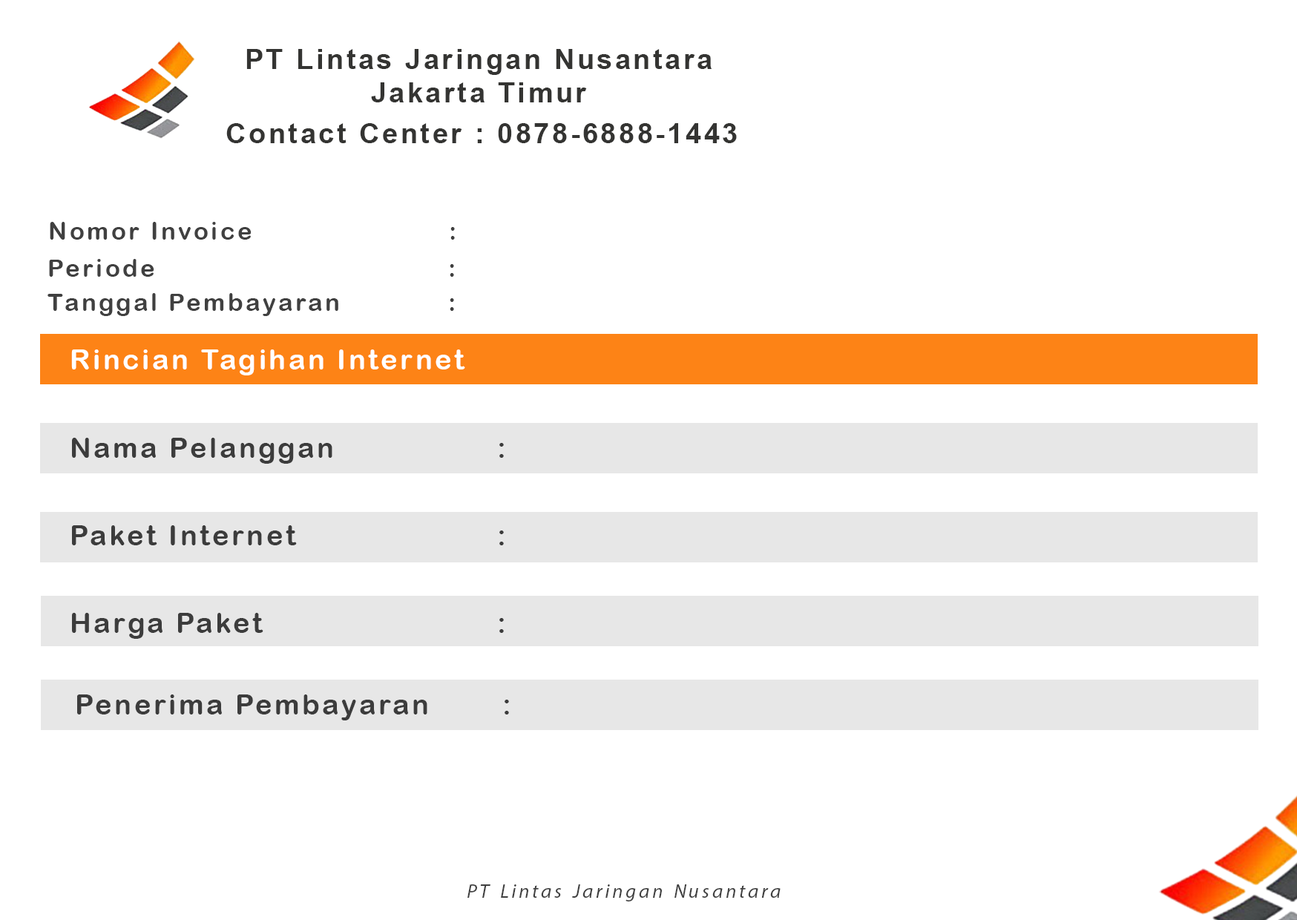
<style>
.page{position:relative;width:1297px;height:920px;background:#ffffff}
.page>*{position:absolute;margin:0}
.t1{font:27.8px "Arial-BoldMT";letter-spacing:0.1em;color:#343432}
.t2{font:24.7px "ArialRoundedMTBold";letter-spacing:0.1em;color:#404040}
.t3{font:27.8px "ArialRoundedMTBold";letter-spacing:0.1em;color:#ffffff}
.t4{font:27.8px "ArialRoundedMTBold";letter-spacing:0.1em;color:#3c3c3c}
.t5{font:27.8px "MyriadArabic-It";letter-spacing:0.1em;color:#404040}
</style>
<div class="page">
<p class="t1" style="left:246px;top:49px;width:465px;height:53px;text-align:center">PT Lintas Jaringan Nusantara<br>Jakarta Timur</p>
<p class="t1" style="left:226px;top:123px;width:511px;height:20px">Contact Center : 0878-6888-1443</p>
<p class="t2" style="left:50px;top:222px;width:405px;height:18px">Nomor Invoice        :</p>
<p class="t2" style="left:49px;top:259px;width:405px;height:18px">Periode           :</p>
<p class="t2" style="left:47px;top:293px;width:407px;height:23px">Tanggal Pembayaran    :</p>
<p class="t3" style="left:71px;top:349px;width:394px;height:26px">Rincian Tagihan Internet</p>
<p class="t4" style="left:72px;top:438px;width:432px;height:26px">Nama Pelanggan       :</p>
<p class="t4" style="left:72px;top:525px;width:432px;height:20px">Paket Internet        :</p>
<p class="t4" style="left:72px;top:613px;width:432px;height:26px">Harga Paket         :</p>
<p class="t4" style="left:77px;top:694px;width:432px;height:26px">Penerima Pembayaran   :</p>
<p class="t5" style="left:467px;top:884px;width:313px;height:17px">PT Lintas Jaringan Nusantara</p>
</div>
